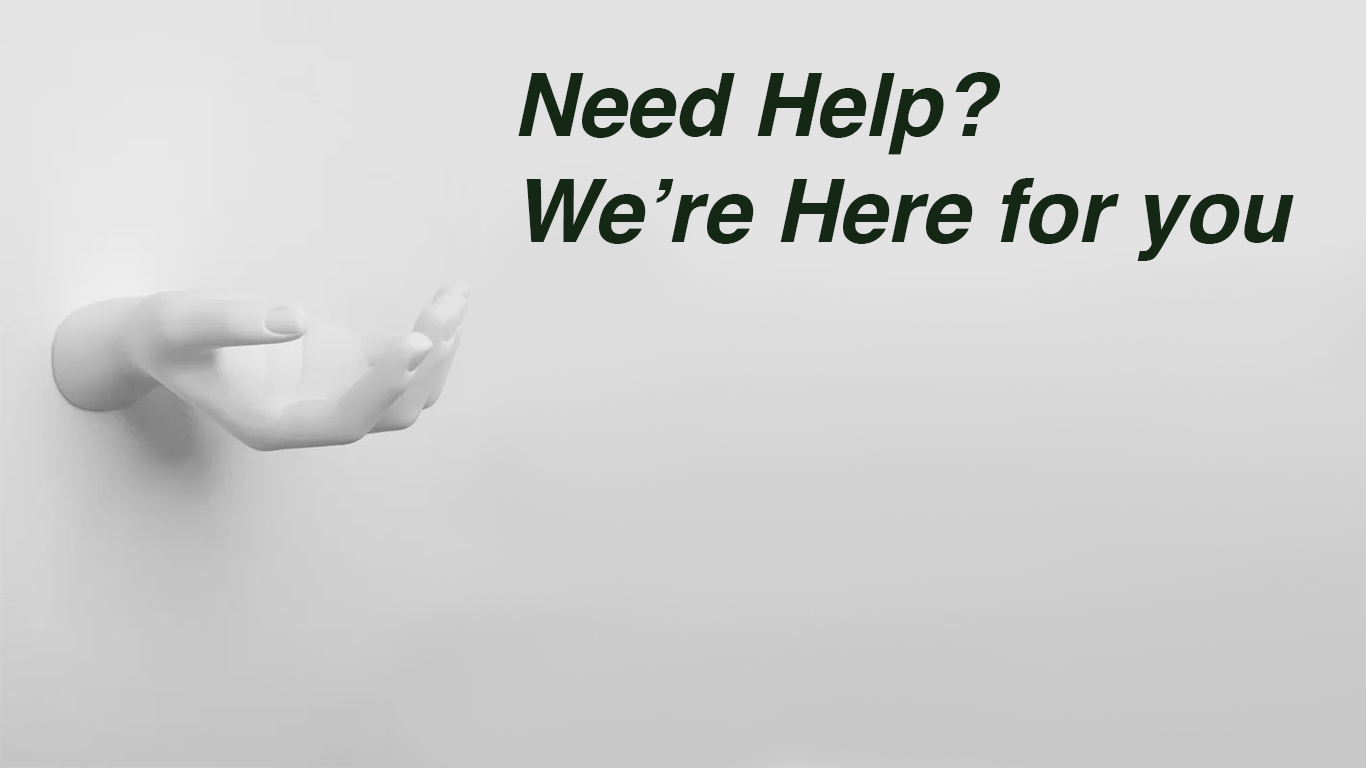
<style>
.page{position:relative;width:1366px;height:768px;background:#e2e2e2}
.page>*{position:absolute;margin:0}
.t1{font:87.6px "Helvetica-BoldOblique";color:#152715}
</style>
<div class="page">
<p class="t1" style="left:518px;top:72px;width:776px;height:189px">Need Help?<br>We’re Here for you</p>
</div>
